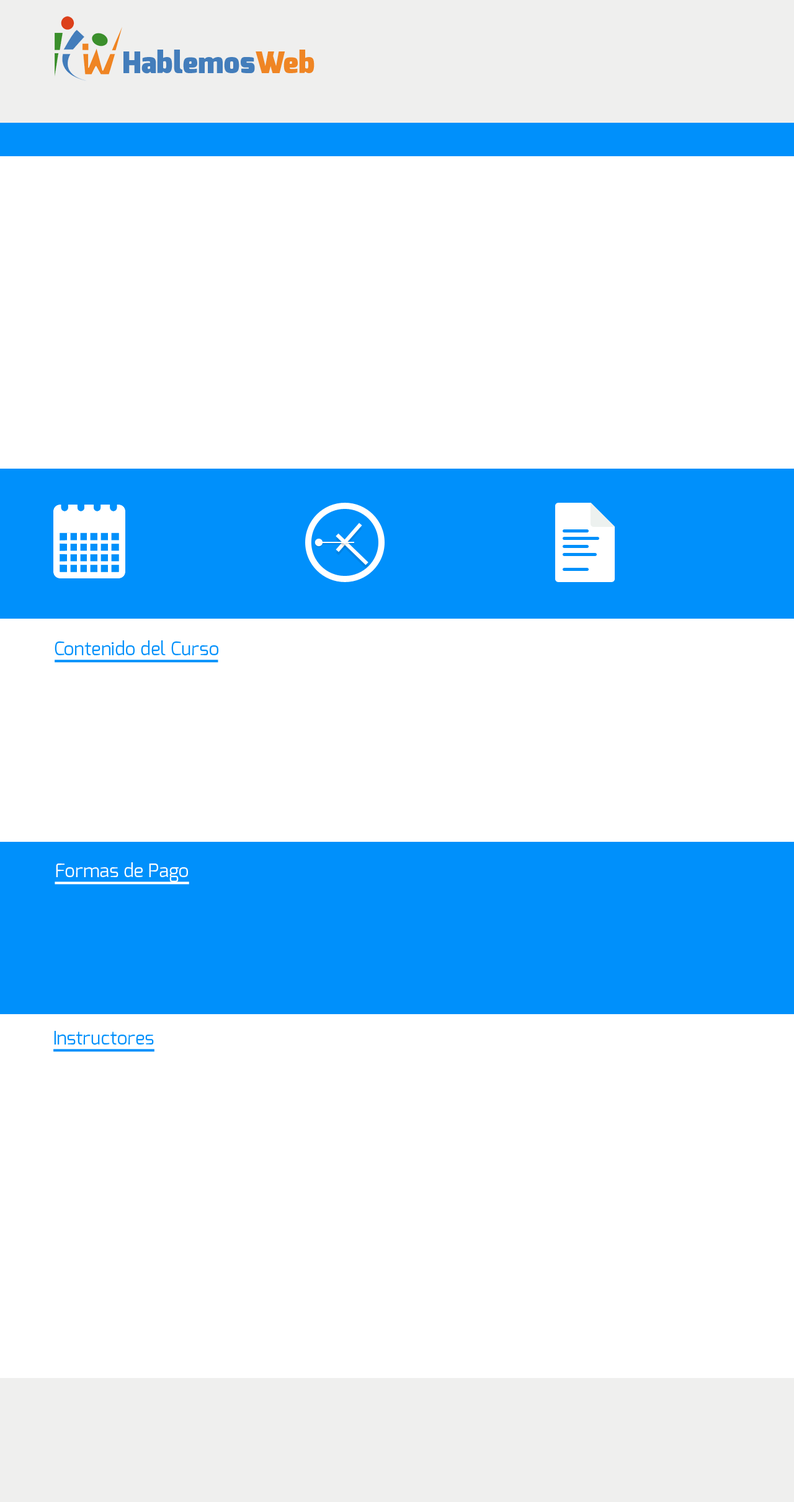
<style>
.page{position:relative;width:794px;height:1502px;background:#ffffff}
.page>*{position:absolute;margin:0}
.t1{font:29.8px "Exo-Black";color:#437dbb}
.t2{font:29.8px "Exo-Black";color:#ef8524}
.t3{font:18.6px "Exo-Regular";color:#0090fb}
.t4{font:18.6px "Exo-Regular";color:#ffffff}
</style>
<div class="page">
<p class="t1" style="left:123px;top:50px;width:191px;height:24px">Hablemos<span class="t2">Web</span></p>
<p class="t3" style="left:55px;top:641px;width:163px;height:15px">Contenido del Curso</p>
<p class="t4" style="left:56px;top:863px;width:132px;height:19px">Formas de Pago</p>
<p class="t3" style="left:54px;top:1031px;width:100px;height:14px">Instructores</p>
</div>
